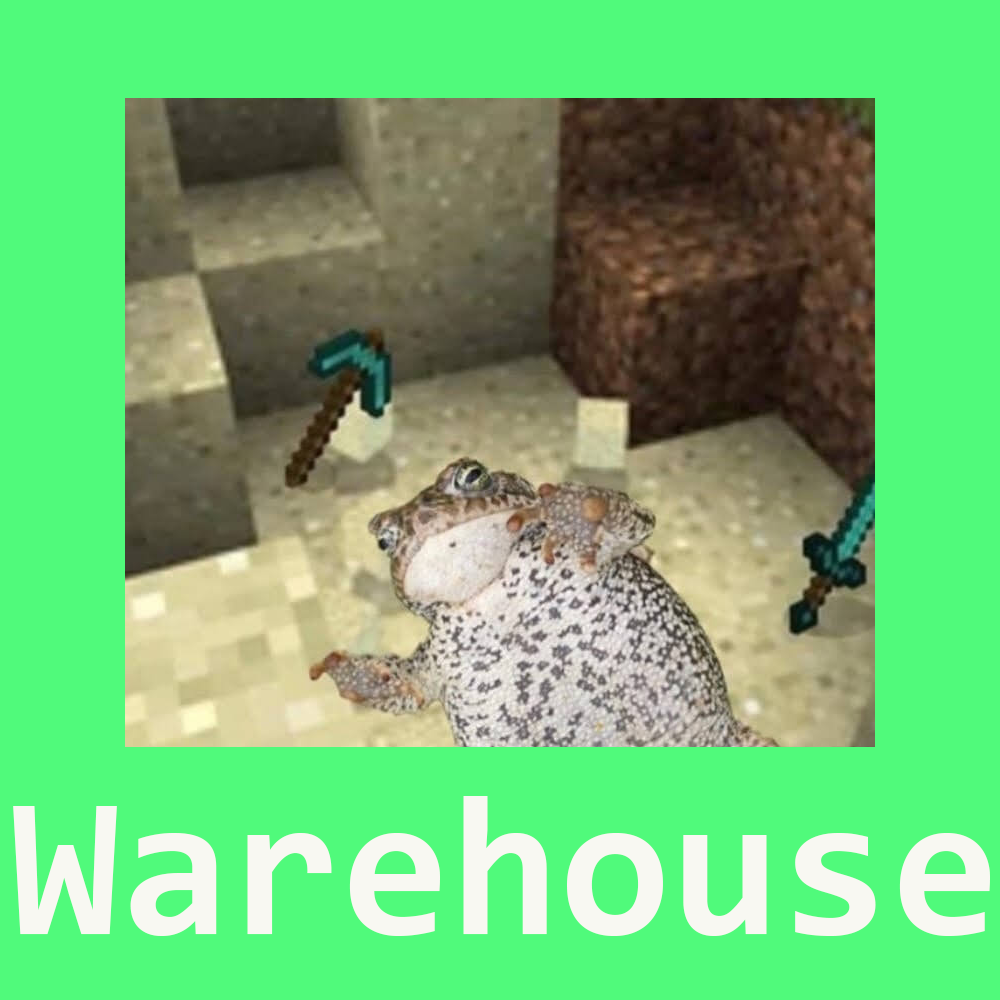
<style>
.page{position:relative;width:1000px;height:1000px;background:#50fa7b}
.page>*{position:absolute;margin:0}
.t1{font:200px "Consolas-Bold";color:#f8f8f2}
</style>
<div class="page">
<p class="t1" style="left:13px;top:796px;width:977px;height:140px">Warehouse</p>
</div>
